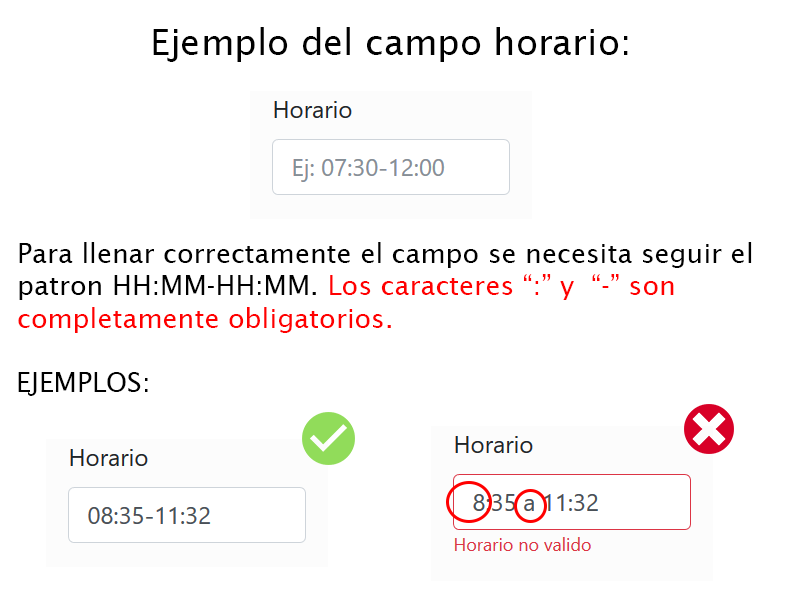
<style>
.page{position:relative;width:800px;height:600px;background:#ffffff}
.page>*{position:absolute;margin:0}
.t1{font:36px "LucidaSans";color:#000000}
.t2{font:27px "LucidaSans";color:#000000}
.t3{font:27px "LucidaSans";color:#ff0000}
</style>
<div class="page">
<p class="t1" style="left:153px;top:27px;width:475px;height:35px">Ejemplo del campo horario:</p>
<p class="t2" style="left:18px;top:242px;width:734px;height:91px">Para llenar correctamente el campo se necesita seguir el <br>patron HH:MM-HH:MM. <span class="t3">Los caracteres “:” y  “-” son <br>completamente obligatorios.</span></p>
<p class="t2" style="left:18px;top:372px;width:130px;height:24px">EJEMPLOS:</p>
</div>
